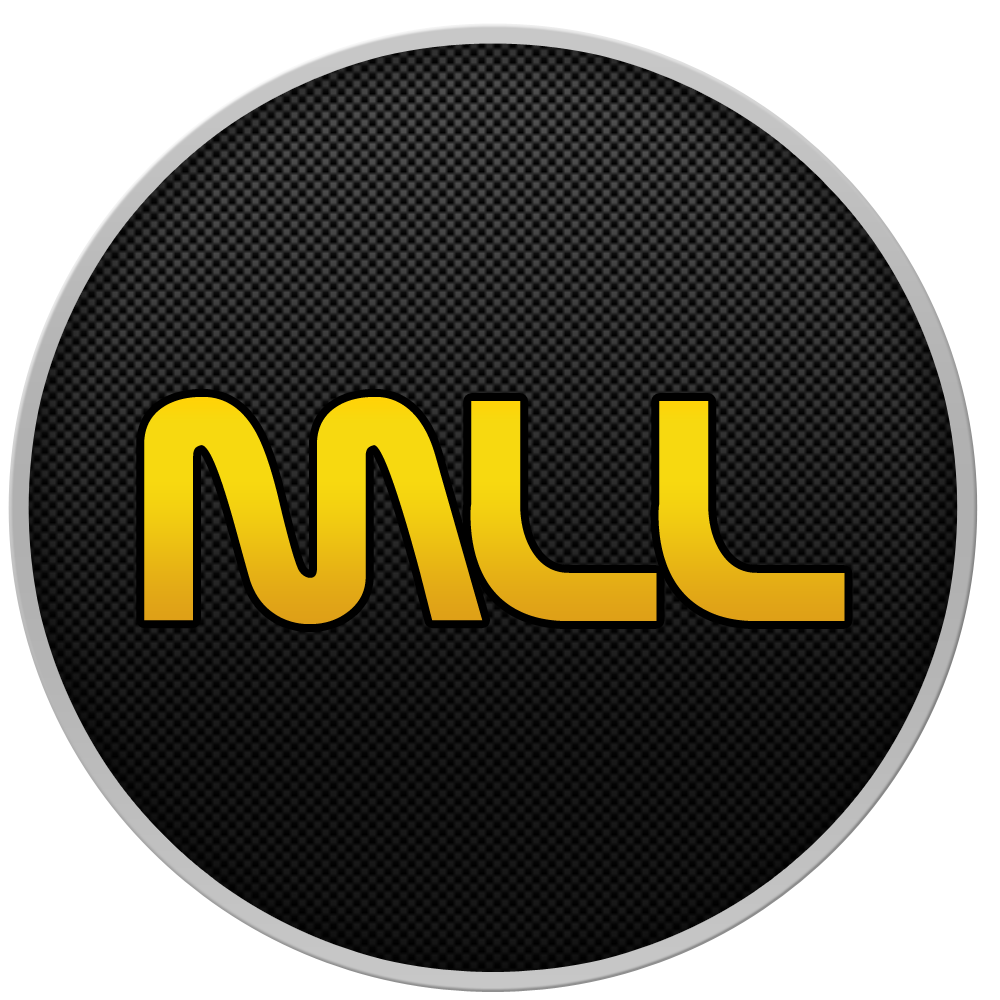
<style>
.page{position:relative;width:1000px;height:1000px;background:#ffffff}
.page>*{position:absolute;margin:0}
.t1{font:331px "Nasalization"}
</style>
<div class="page">
<p class="t1" style="left:144px;top:397px;width:701px;height:227px">mll</p>
</div>
